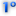
<style>
.page{position:relative;width:16px;height:16px}
.page>*{position:absolute;margin:0}
.t1{font:14px "CenturyGothic-Bold";font-weight:bold}
</style>
<div class="page">
<p class="t1" style="left:3px;top:1px;width:13px;height:12px">1°</p>
</div>
